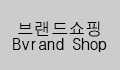
<style>
.page{position:relative;width:120px;height:70px;background:#cccccc}
.page>*{position:absolute;margin:0}
.t1{font:17.1px/15.4px "DotumChe";color:#000000}
</style>
<div class="page">
<p class="t1" style="left:13px;top:21px;width:94px;height:31px;text-align:center">브랜드쇼핑<br>Bvrand Shop</p>
</div>
